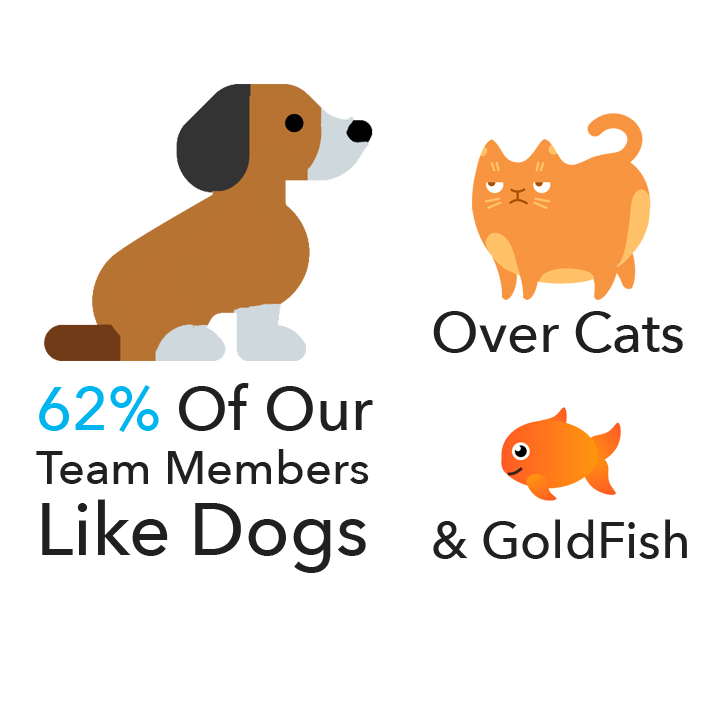
<style>
.page{position:relative;width:720px;height:720px;background:#ffffff}
.page>*{position:absolute;margin:0}
.t1{font:56px "AvenirNext-Medium";color:#202020}
.t2{font:61px "AvenirNext-Medium";color:#202020}
.t3{font:61px "AvenirNext-Medium";color:#00b5ee}
.t4{font:47px "AvenirNext-Medium";color:#202020}
.t5{font:73px "AvenirNext-Medium";color:#202020}
.t6{font:51px "AvenirNext-Medium";color:#202020}
</style>
<div class="page">
<p class="t1" style="left:433px;top:311px;width:250px;height:42px">Over Cats</p>
<p class="t2" style="left:39px;top:383px;width:334px;height:49px"><span class="t3">62% </span>Of Our</p>
<p class="t4" style="left:36px;top:449px;width:333px;height:35px">Team Members</p>
<p class="t5" style="left:42px;top:499px;width:324px;height:74px">Like Dogs</p>
<p class="t6" style="left:433px;top:519px;width:254px;height:40px">&amp; GoldFish</p>
</div>
